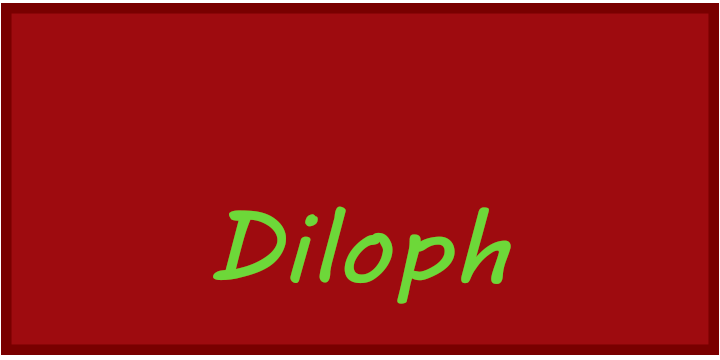
<style>
.page{position:relative;width:720px;height:360px;background:#9e0b0f}
.page>*{position:absolute;margin:0}
.t1{font:100px "MVBoli";color:#6dd839;scale:1.06 1}
</style>
<div class="page">
<p class="t1" style="left:213px;top:206px;width:298px;height:98px">Diloph</p>
</div>
